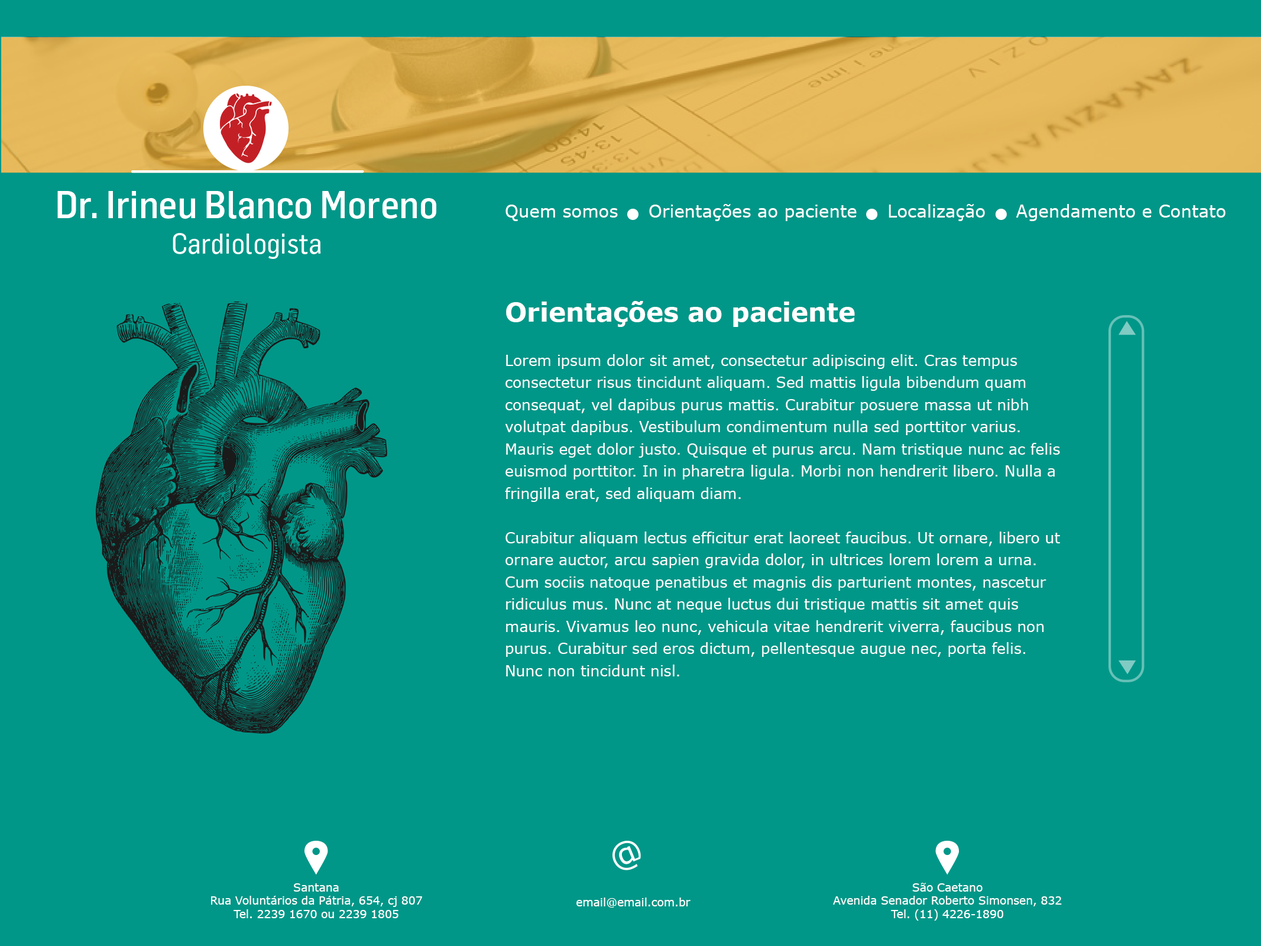
<style>
.page{position:relative;width:1261px;height:946px;background:#009788}
.page>*{position:absolute;margin:0}
.t1{font:17.2px "Verdana";color:#ffffff}
.t2{font:14.8px/22.2px "Verdana";color:#ffffff}
.t3{font:25.9px/22.2px "Verdana-Bold";color:#ffffff}
.t4{font:11.1px "Verdana";color:#ffffff}
</style>
<div class="page">
<p class="t1" style="left:505px;top:204px;width:720px;height:17px">Quem somos     Orientações ao paciente     Localização     Agendamento e Contato</p>
<p class="t2" style="left:505px;top:301px;width:555px;height:375px"><span class="t3">Orientações ao paciente<br></span><br>Lorem ipsum dolor sit amet, consectetur adipiscing elit. Cras tempus consectetur risus tincidunt aliquam. Sed mattis ligula bibendum quam consequat, vel dapibus purus mattis. Curabitur posuere massa ut nibh volutpat dapibus. Vestibulum condimentum nulla sed porttitor varius. Mauris eget dolor justo. Quisque et purus arcu. Nam tristique nunc ac felis euismod porttitor. In in pharetra ligula. Morbi non hendrerit libero. Nulla a fringilla erat, sed aliquam diam.<br><br>Curabitur aliquam lectus efficitur erat laoreet faucibus. Ut ornare, libero ut ornare auctor, arcu sapien gravida dolor, in ultrices lorem lorem a urna. Cum sociis natoque penatibus et magnis dis parturient montes, nascetur ridiculus mus. Nunc at neque luctus dui tristique mattis sit amet quis mauris. Vivamus leo nunc, vehicula vitae hendrerit viverra, faucibus non purus. Curabitur sed eros dictum, pellentesque augue nec, porta felis. Nunc non tincidunt nisl.</p>
<p class="t4" style="left:211px;top:883px;width:211px;height:35px;text-align:center">Santana<br>Rua Voluntários da Pátria, 654, cj 807<br>Tel. 2239 1670 ou 2239 1805</p>
<p class="t4" style="left:833px;top:883px;width:229px;height:37px;text-align:center">São Caetano<br>Avenida Senador Roberto Simonsen, 832<br>Tel. (11) 4226-1890</p>
<p class="t4" style="left:576px;top:897px;width:114px;height:10px">email@email.com.br</p>
</div>
